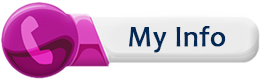
<style>
.page{position:relative;width:260px;height:80px;background:#ffffff}
.page>*{position:absolute;margin:0}
.t1{font:28.9px "Candara";color:#022955;font-weight:bold}
</style>
<div class="page">
<p class="t1" style="left:129px;top:26px;width:97px;height:27px">My Info</p>
</div>
